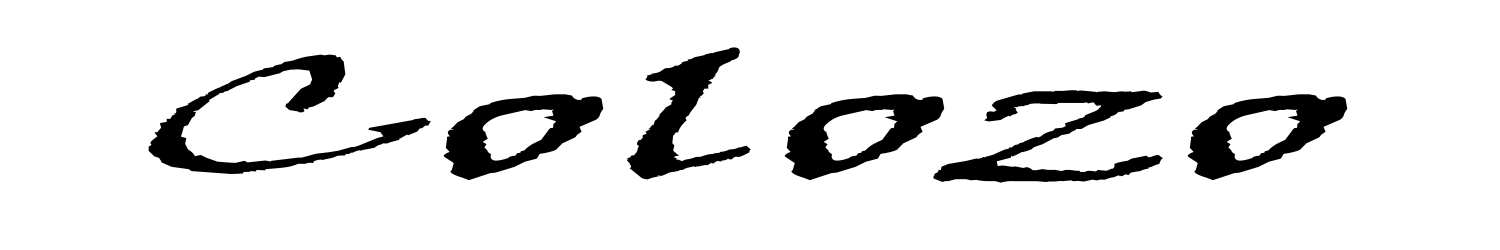
<style>
.page{position:relative;width:1500px;height:250px;background:#ffffff}
.page>*{position:absolute;margin:0}
.t1{font:170.5px "VinerHandITC";color:#000000;scale:2.45 1}
</style>
<div class="page">
<p class="t1" style="left:148px;top:47px;width:1200px;height:136px">Colozo</p>
</div>
